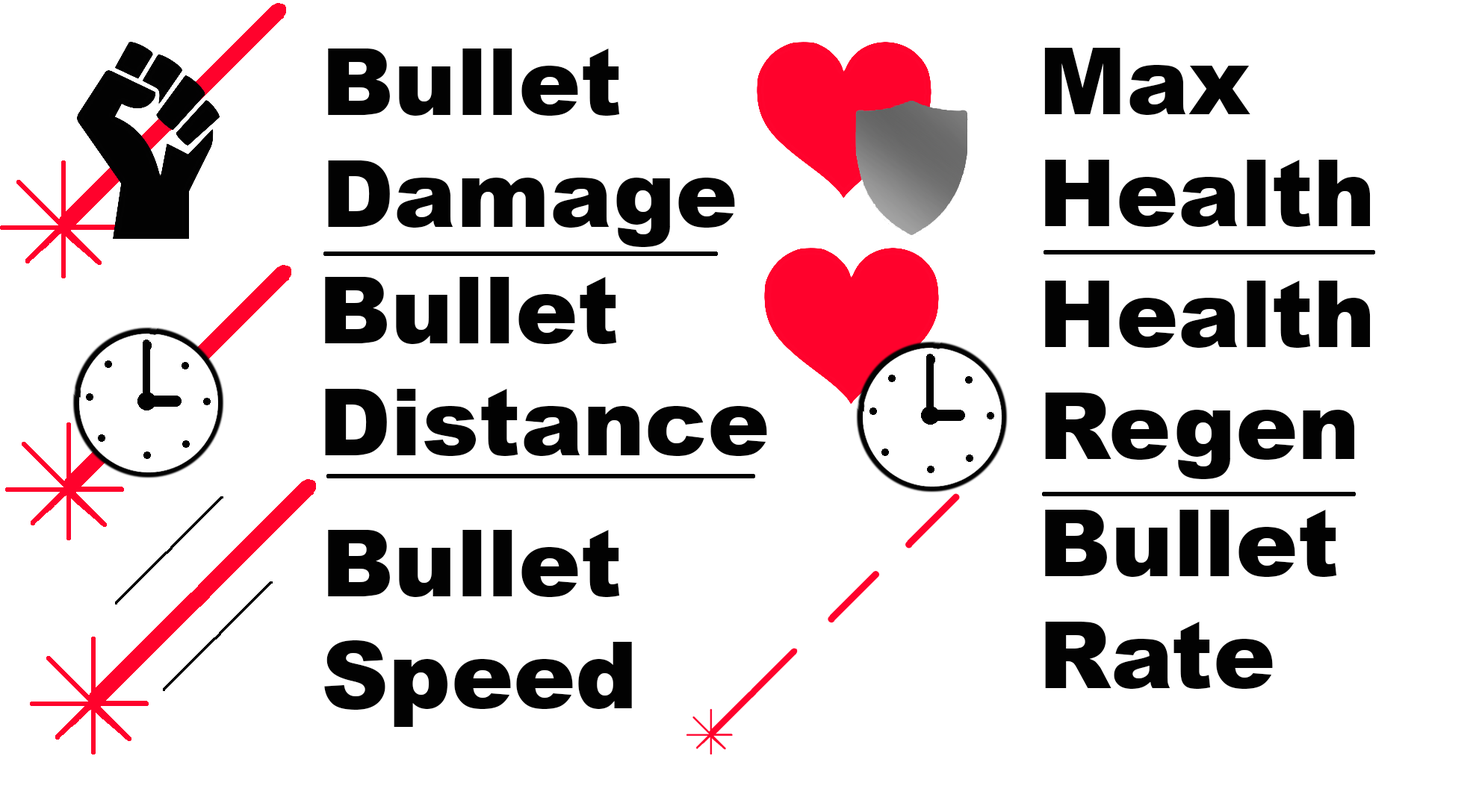
<style>
.page{position:relative;width:1479px;height:806px;background:#ffffff}
.page>*{position:absolute;margin:0}
.t1{font:93.3px "Arial-Black";color:#020202}
</style>
<div class="page">
<p class="t1" style="left:328px;top:49px;width:407px;height:198px">Bullet<br>Damage</p>
<p class="t1" style="left:1044px;top:48px;width:326px;height:179px">Max<br>Health</p>
<p class="t1" style="left:325px;top:277px;width:442px;height:179px">Bullet <br>Distance</p>
<p class="t1" style="left:1045px;top:281px;width:325px;height:198px">Health<br>Regen</p>
<p class="t1" style="left:1045px;top:510px;width:292px;height:179px">Bullet<br>Rate</p>
<p class="t1" style="left:324px;top:530px;width:308px;height:197px">Bullet<br>Speed</p>
</div>
